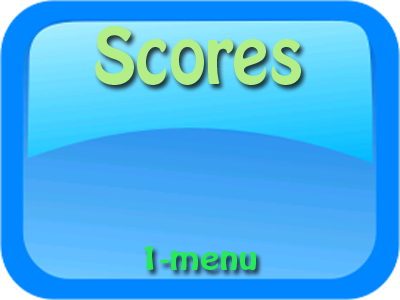
<style>
.page{position:relative;width:400px;height:300px;background:#0086ff}
.page>*{position:absolute;margin:0}
.t1{font:68.5px "HoboStd";color:#b3ee87}
.t2{font:28.2px "HoboStd";color:#27eb55;scale:1.28 1}
</style>
<div class="page">
<p class="t1" style="left:95px;top:26px;width:206px;height:59px">Scores</p>
<p class="t2" style="left:144px;top:246px;width:112px;height:24px">1-menu</p>
</div>
